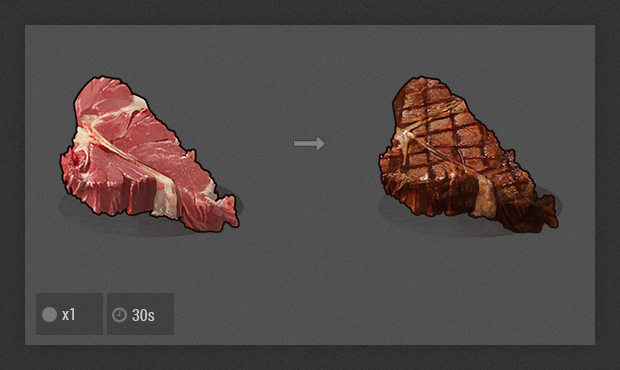
<style>
.page{position:relative;width:620px;height:370px}
.page>*{position:absolute;margin:0}
.t1{font:16px "RobotoCondensed-Regular";color:#d3cdc9}
</style>
<div class="page">
<p class="t1" style="left:62px;top:308px;width:12px;height:12px">x1</p>
<p class="t1" style="left:132px;top:309px;width:23px;height:12px">30s</p>
</div>
